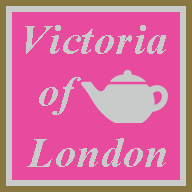
<style>
.page{position:relative;width:192px;height:192px;background:#e84b9d}
.page>*{position:absolute;margin:0}
.t1{font:42px "TimesNewRomanPS-BoldItalicMT";letter-spacing:0.025em;color:#c9caca}
</style>
<div class="page">
<p class="t1" style="left:25px;top:25px;width:141px;height:29px">Victoria</p>
<p class="t1" style="left:39px;top:77px;width:42px;height:38px">of</p>
<p class="t1" style="left:27px;top:138px;width:139px;height:29px">London</p>
</div>
